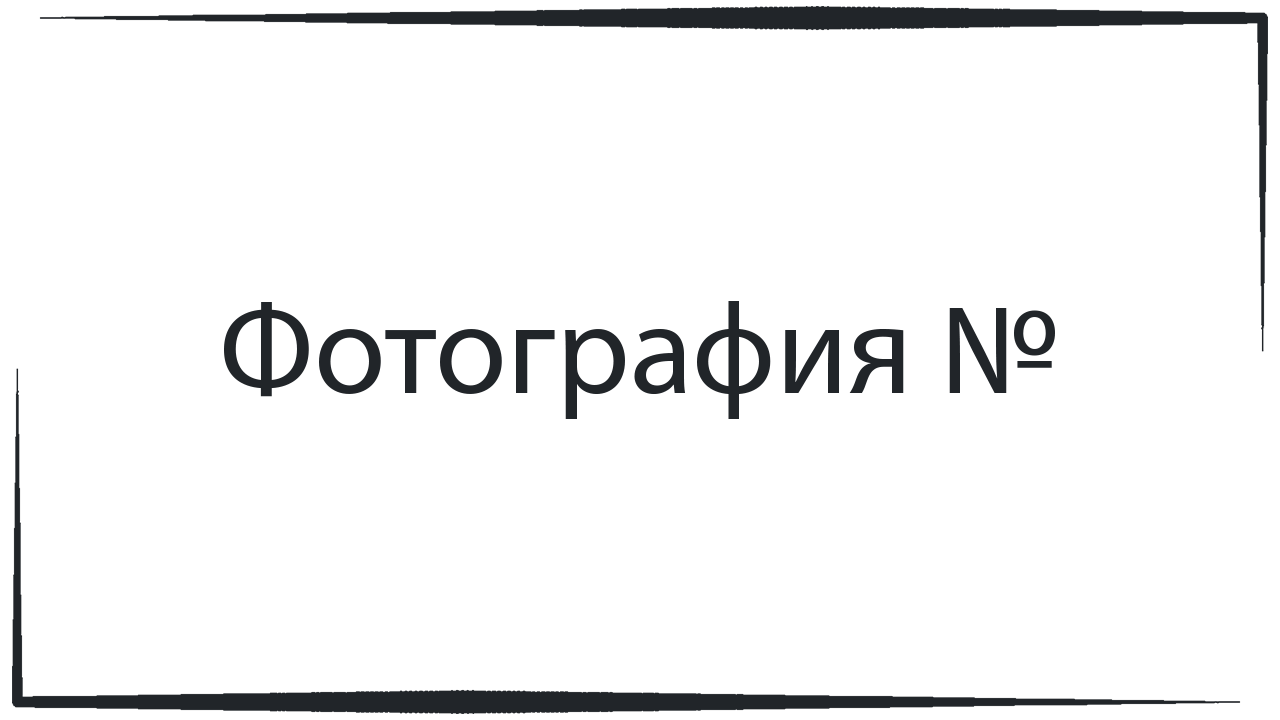
<style>
.page{position:relative;width:1280px;height:720px;background:#ffffff}
.page>*{position:absolute;margin:0}
.t1{font:130px "MyriadPro-Regular";color:#212529}
</style>
<div class="page">
<p class="t1" style="left:224px;top:301px;width:831px;height:118px">Фотография №</p>
</div>
